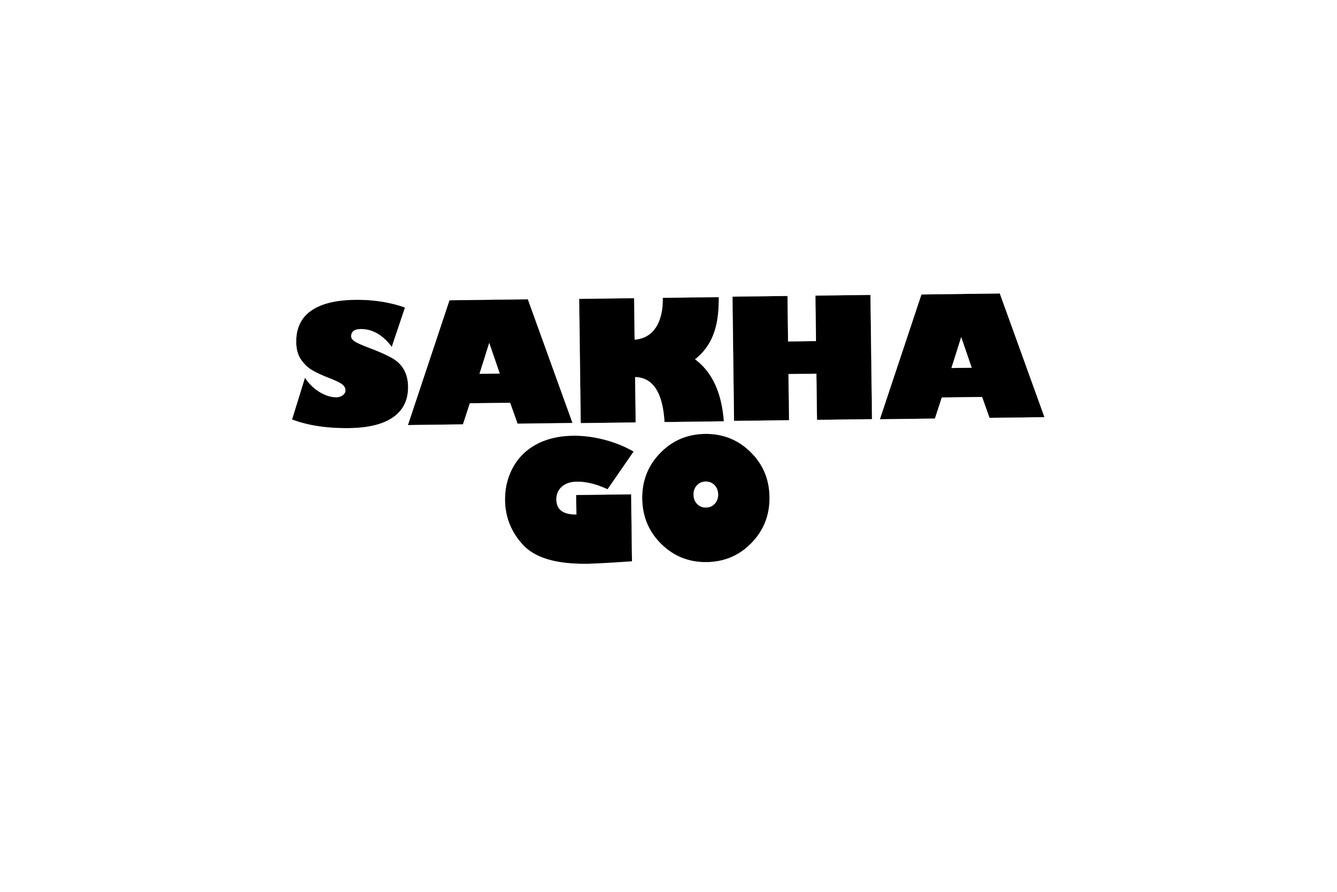
<style>
.page{position:relative;width:1337px;height:892px;background:#ffffff}
.page>*{position:absolute;margin:0}
.t1{font:166.7px/138.9px "GillSans-UltraBold";letter-spacing:-0.025em;color:#000000}
</style>
<div class="page">
<p class="t1" style="left:292px;top:293px;width:753px;height:271px;rotate:-1deg">SAKHA<br>    GO</p>
</div>
